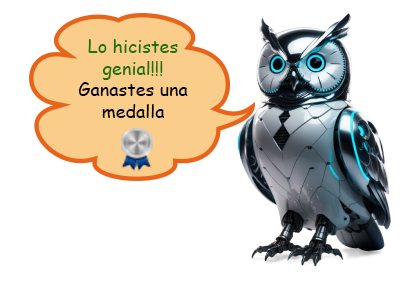
<style>
.page{position:relative;width:400px;height:300px;background:#ffffff}
.page>*{position:absolute;margin:0}
.t1{font:18px "ComicSansMS";color:#1d7207}
.t2{font:18px "ComicSansMS";color:#000000}
</style>
<div class="page">
<p class="t1" style="left:78px;top:39px;width:110px;height:79px;text-align:center">Lo hicistes genial!!! <span class="t2">Ganastes una medalla</span></p>
</div>
